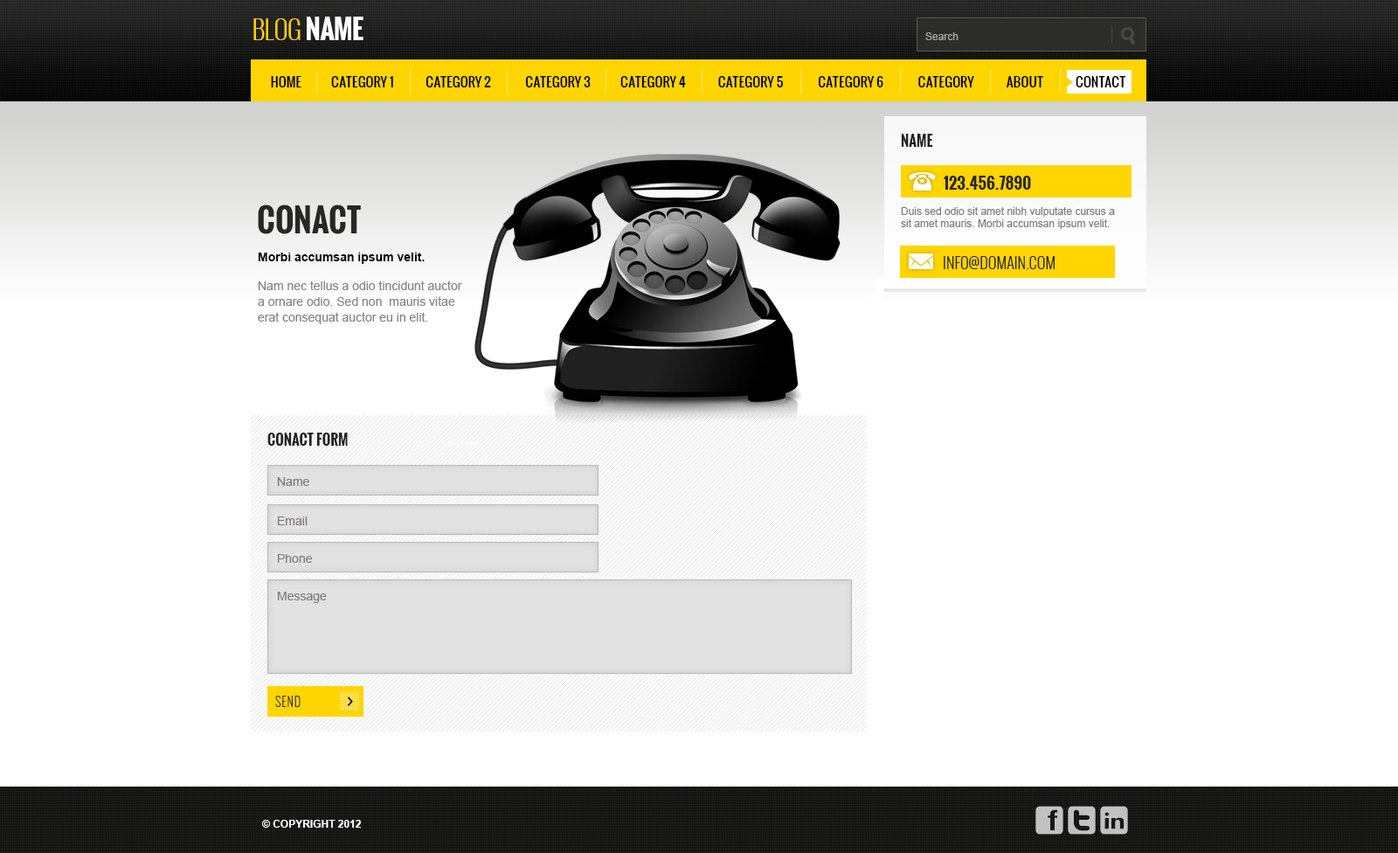
<style>
.page{position:relative;width:1398px;height:853px;background:#ffffff}
.page>*{position:absolute;margin:0}
.t1{font:26.2px "Oswald-Light";letter-spacing:-0.02em;color:#ffd500;text-transform:uppercase}
.t2{font:26.2px "Oswald-Bold";letter-spacing:-0.02em;color:#ffffff;text-transform:uppercase}
.t3{font:10.5px "ArialMT";color:#a7a7a4}
.t4{font:13.1px "Oswald";letter-spacing:0.003em;color:#000000;text-transform:uppercase}
.t5{font:14px "Oswald-Bold";color:#222222;text-transform:uppercase}
.t6{font:15.8px "Oswald-Bold";color:#272726;text-transform:uppercase}
.t7{font:31.5px "Oswald-Bold";color:#272726;text-transform:uppercase}
.t8{font:10.5px/12.2px "ArialMT";color:#7f7c7c}
.t9{font:12.2px/15.7px "ArialMT";color:#878585}
.t10{font:12.2px/21px "Arial-BoldMT";color:#040303}
.t11{font:12.2px/13.1px "ArialMT";color:#878585}
.t12{font:15.8px "Oswald-Light";color:#272726;text-transform:uppercase}
.t13{font:12.2px "ArialMT";color:#7f7c7c}
.t14{font:12.2px "Oswald-Light";letter-spacing:0.055em;color:#2c2c2b;text-transform:uppercase}
.t15{font:10.5px "Arial-BoldMT";color:#ffffff;text-transform:uppercase}
</style>
<div class="page">
<p class="t1" style="left:253px;top:17px;width:111px;height:23px">Blog<span class="t2"> Name</span></p>
<p class="t3" style="left:925px;top:32px;width:34px;height:8px">Search</p>
<p class="t4" style="left:271px;top:76px;width:855px;height:11px">Home             Category 1              Category 2               Category 3             Category 4              Category 5               Category 6               Category              about              Contact</p>
<p class="t5" style="left:901px;top:134px;width:32px;height:13px">Name</p>
<p class="t6" style="left:944px;top:176px;width:87px;height:14px">123.456.7890</p>
<p class="t7" style="left:258px;top:204px;width:103px;height:30px">Conact</p>
<p class="t8" style="left:901px;top:207px;width:214px;height:22px">Duis sed odio sit amet nibh vulputate cursus a sit amet mauris. Morbi accumsan ipsum velit.</p>
<p class="t9" style="left:258px;top:253px;width:204px;height:71px"><span class="t10">Morbi accumsan ipsum velit.<br><br></span><span class="t11">Nam nec tellus a odio tincidunt auctor</span> a ornare odio. Sed non  mauris vitae erat consequat auctor eu in elit.</p>
<p class="t12" style="left:944px;top:256px;width:111px;height:13px">info@domain.com</p>
<p class="t5" style="left:267px;top:433px;width:81px;height:13px">Conact form</p>
<p class="t13" style="left:277px;top:477px;width:32px;height:9px">Name</p>
<p class="t13" style="left:278px;top:516px;width:30px;height:9px">Email</p>
<p class="t13" style="left:278px;top:554px;width:34px;height:9px">Phone</p>
<p class="t13" style="left:277px;top:592px;width:50px;height:11px">Message</p>
<p class="t14" style="left:275px;top:696px;width:26px;height:11px">Send</p>
<p class="t15" style="left:261px;top:820px;width:100px;height:8px">© Copyright 2012</p>
</div>
